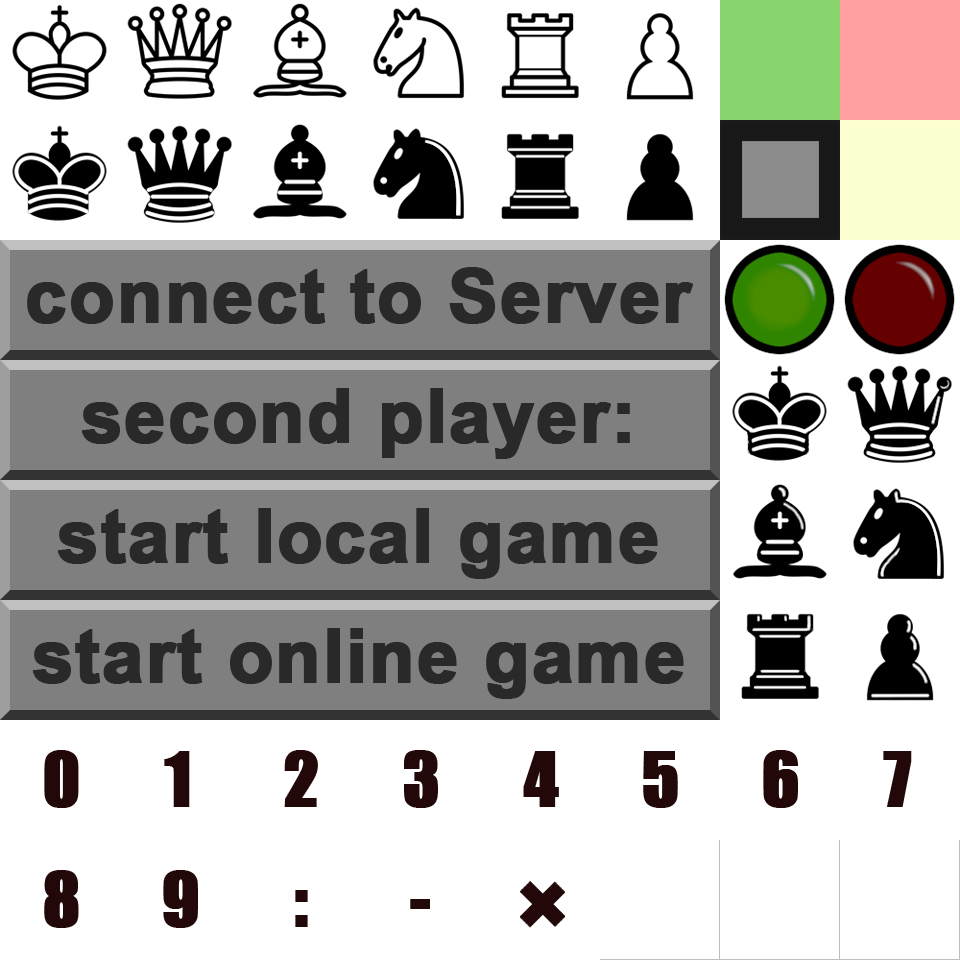
<style>
.page{position:relative;width:960px;height:960px;background:#ffffff}
.page>*{position:absolute;margin:0}
.t1{font:75.7px/120px "ArialNarrow-Bold";color:#292929;font-weight:bold;scale:1.2 1}
.t2{font:69.1px/120px "Impact";letter-spacing:1.19em;color:#220808;font-weight:bold}
.t3{font:69.1px/120px "Impact";letter-spacing:1.21em;color:#220808;font-weight:bold}
.t4{font:69.1px/120px "Impact";letter-spacing:1.31em;color:#220808;font-weight:bold}
.t5{font:69.1px/120px "Impact";letter-spacing:1.17em;color:#220808;font-weight:bold}
.t6{font:69.1px/120px "Impact";letter-spacing:1.33em;color:#220808;font-weight:bold}
.t7{font:69.1px/120px "Impact";letter-spacing:1.45em;color:#220808;font-weight:bold}
.t8{font:69.1px/120px "Impact";letter-spacing:1.2em;color:#220808;font-weight:bold}
</style>
<div class="page">
<p class="t1" style="left:27px;top:267px;width:666px;height:432px;text-align:center">connect to Server<br>second player:<br>start local game<br>start online game</p>
<p class="t2" style="left:44px;top:750px;width:868px;height:178px"><span class="t3">0</span><span class="t4">1</span>234<span class="t5">5</span><span class="t3">67<br></span><span class="t5">8</span><span class="t6">9</span><span class="t7">:</span><span class="t8">-</span></p>
</div>
